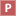
<style>
.page{position:relative;width:16px;height:16px;background:#c05a5a}
.page>*{position:absolute;margin:0}
.t1{font:12px "MyriadPro-Bold";color:#ffffff}
</style>
<div class="page">
<p class="t1" style="left:5px;top:3px;width:7px;height:9px">P</p>
</div>
